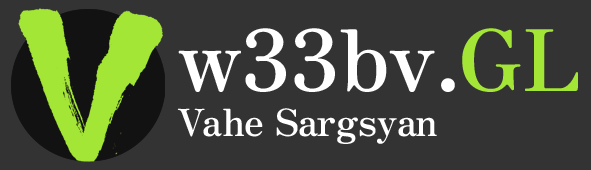
<style>
.page{position:relative;width:591px;height:170px;background:#333333}
.page>*{position:absolute;margin:0}
.t1{font:37.6px "ZenAntiqueSoft-Regular";color:#ffffff}
.t2{font:85px "ZenAntiqueSoft-Regular";color:#ffffff}
.t3{font:85px "ZenAntiqueSoft-Regular";color:#a3e635}
</style>
<div class="page">
<p class="t1" style="left:177px;top:28px;width:401px;height:116px"><span class="t2">w33bv.</span><span class="t3">GL<br></span>Vahe Sargsyan</p>
</div>
